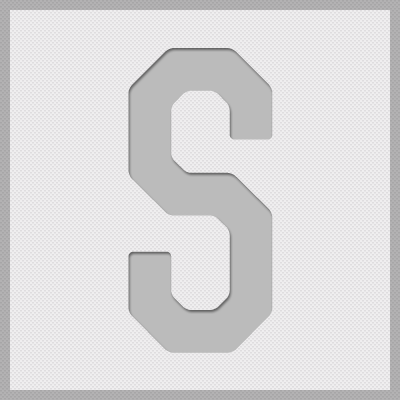
<style>
.page{position:relative;width:400px;height:400px;background:#efeeef}
.page>*{position:absolute;margin:0}
.t1{font:400px "Vincent-Regular";color:#bbbbbb}
</style>
<div class="page">
<p class="t1" style="left:128px;top:48px;width:145px;height:305px">S</p>
</div>
